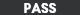
<style>
.page{position:relative;width:80px;height:15px;background:#333436}
.page>*{position:absolute;margin:0}
.t1{font:11px "HeadlineR-HM";letter-spacing:-0.02em;color:#ffffff}
</style>
<div class="page">
<p class="t1" style="left:24px;top:3px;width:33px;height:10px">PASS</p>
</div>
